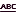
<style>
.page{position:relative;width:16px;height:16px;background:#ffffff}
.page>*{position:absolute;margin:0}
.t1{font:10px "Tunga";color:#1f0014}
</style>
<div class="page">
<p class="t1" style="left:0px;top:4px;width:17px;height:5px">ABC</p>
</div>
